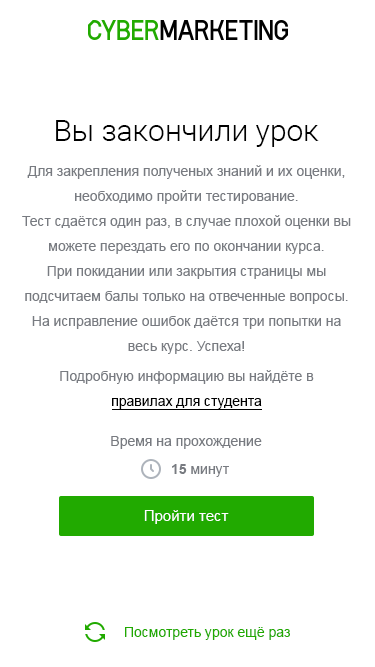
<style>
.page{position:relative;width:375px;height:667px;background:#ffffff}
.page>*{position:absolute;margin:0}
.t1{font:30px "Roboto-Light";color:#000000}
.t2{font:14px/25px "ArialMT";color:#787b81}
.t3{font:14px/30px "ArialMT";color:#787b81}
.t4{font:14px/25px "ArialMT";color:#000000}
.t5{font:14px "ArialMT";color:#787b81}
.t6{font:14px "Arial-BoldMT";color:#787b81}
.t7{font:15px "ArialMT";color:#ffffff}
.t8{font:14px "ArialMT";color:#21aa00}
</style>
<div class="page">
<p class="t1" style="left:56px;top:120px;width:263px;height:27px">Вы закончили урок</p>
<p class="t2" style="left:22px;top:165px;width:329px;height:244px;text-align:center">Для закрепления полученых знаний и их оценки, необходимо пройти тестирование.<br>Тест сдаётся один раз, в случае плохой оценки вы можете перездать его по окончании курса.<br>При покидании или закрытия страницы мы <br>подсчитаем балы только на отвеченные вопросы.<br>На исправление ошибок даётся три попытки на весь курс. Успеха!<br><span class="t3">Подробную ин</span>формацию вы найдёте в <br><span class="t4">правилах для студента</span></p>
<p class="t5" style="left:111px;top:436px;width:151px;height:13px">Время на прохождение</p>
<p class="t5" style="left:172px;top:464px;width:57px;height:13px"><span class="t6">15 </span>минут</p>
<p class="t7" style="left:144px;top:510px;width:85px;height:14px">Пройти тест</p>
<p class="t8" style="left:125px;top:627px;width:165px;height:13px">Посмотреть урок ещё раз</p>
</div>
